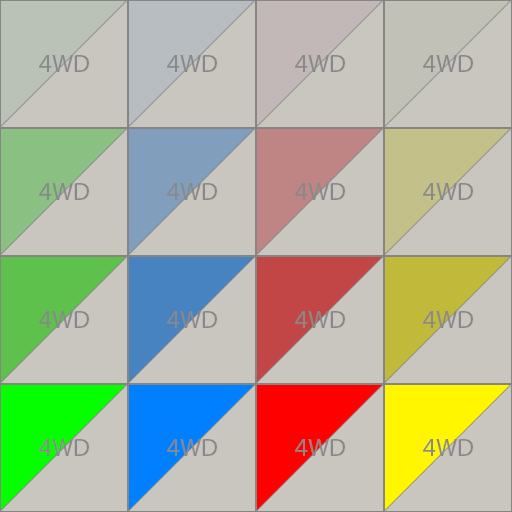
<style>
.page{position:relative;width:512px;height:512px;background:#c8c6bf}
.page>*{position:absolute;margin:0}
.t1{font:25px "MyriadPro-Regular";color:#898989}
</style>
<div class="page">
<p class="t1" style="left:39px;top:55px;width:50px;height:17px">4WD</p>
<p class="t1" style="left:167px;top:55px;width:50px;height:17px">4WD</p>
<p class="t1" style="left:295px;top:55px;width:50px;height:17px">4WD</p>
<p class="t1" style="left:423px;top:55px;width:50px;height:17px">4WD</p>
<p class="t1" style="left:39px;top:183px;width:50px;height:17px">4WD</p>
<p class="t1" style="left:167px;top:183px;width:50px;height:17px">4WD</p>
<p class="t1" style="left:295px;top:183px;width:50px;height:17px">4WD</p>
<p class="t1" style="left:423px;top:183px;width:50px;height:17px">4WD</p>
<p class="t1" style="left:39px;top:311px;width:50px;height:17px">4WD</p>
<p class="t1" style="left:167px;top:311px;width:50px;height:17px">4WD</p>
<p class="t1" style="left:295px;top:311px;width:50px;height:17px">4WD</p>
<p class="t1" style="left:423px;top:311px;width:50px;height:17px">4WD</p>
<p class="t1" style="left:39px;top:439px;width:50px;height:17px">4WD</p>
<p class="t1" style="left:167px;top:439px;width:50px;height:17px">4WD</p>
<p class="t1" style="left:295px;top:439px;width:50px;height:17px">4WD</p>
<p class="t1" style="left:423px;top:439px;width:50px;height:17px">4WD</p>
</div>
